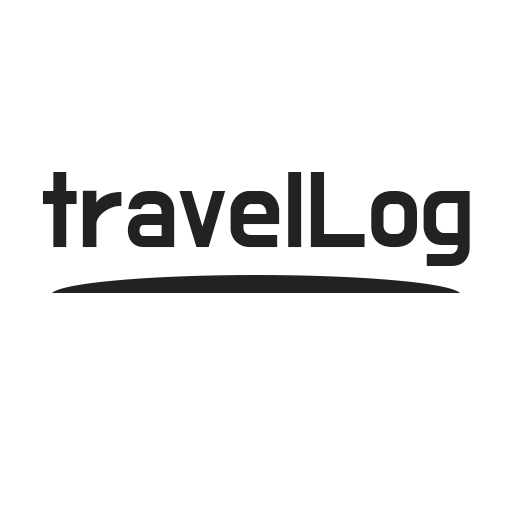
<style>
.page{position:relative;width:512px;height:512px;background:#ffffff}
.page>*{position:absolute;margin:0}
.t1{font:110px "DoHyeon-Regular";color:#222222}
</style>
<div class="page">
<p class="t1" style="left:42px;top:172px;width:428px;height:94px">travelLog</p>
</div>
